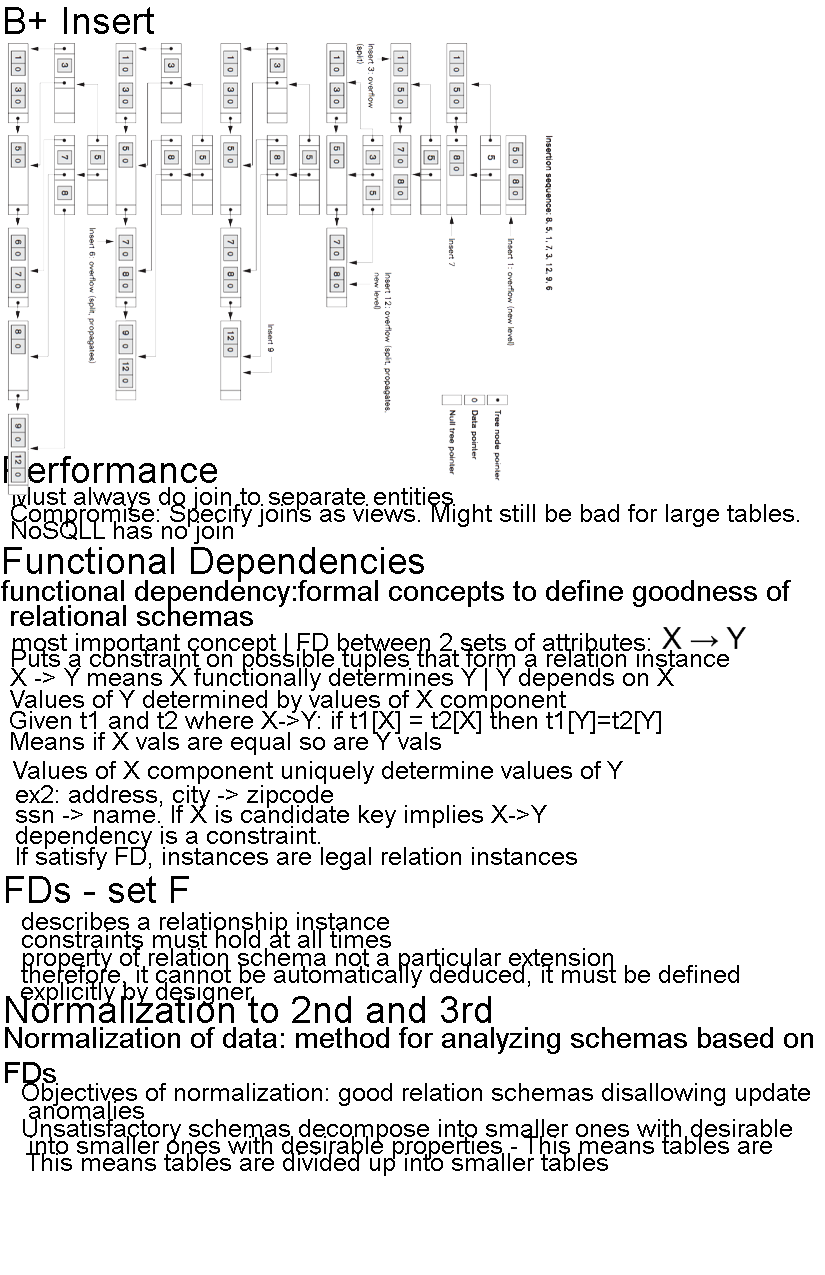
<style>
.page{position:relative;width:825px;height:1275px;background:#ffffff}
.page>*{position:absolute;margin:0}
.t1{font:37.5px "ArialMT";color:#000000}
.t2{font:25px "ArialMT";color:#000000}
.t3{font:29.2px/25px "ArialMT";color:#000000}
.t4{font:25px/20.9px "ArialMT";color:#000000}
.t5{font:29.2px "ArialMT";color:#000000}
</style>
<div class="page">
<p class="t1" style="left:5px;top:7px;width:149px;height:27px">B+ Insert</p>
<p class="t1" style="left:4px;top:456px;width:213px;height:27px">Performance</p>
<p class="t2" style="left:13px;top:487px;width:440px;height:23px">Must always do join to separate entities</p>
<p class="t2" style="left:11px;top:504px;width:788px;height:23px">Compromise: Specify joins as views. Might still be bad for large tables.</p>
<p class="t2" style="left:12px;top:521px;width:221px;height:23px">NoSQLL has no join</p>
<p class="t1" style="left:4px;top:547px;width:420px;height:35px">Functional Dependencies</p>
<p class="t3" style="left:1px;top:580px;width:790px;height:46px">functional dependency:formal concepts to define goodness of<br> relational schemas</p>
<p class="t2" style="left:13px;top:633px;width:637px;height:23px">most important concept | FD between 2 sets of attributes:</p>
<p class="t2" style="left:12px;top:649px;width:717px;height:23px">Puts a constraint on possible tuples that form a relation instance</p>
<p class="t2" style="left:10px;top:668px;width:664px;height:23px">X -&gt; Y means X functionally determines Y | Y depends on X</p>
<p class="t2" style="left:10px;top:690px;width:556px;height:23px">Values of Y determined by values of X component</p>
<p class="t4" style="left:10px;top:711px;width:651px;height:44px">Given t1 and t2 where X-&gt;Y: if t1[X] = t2[X] then t1[Y]=t2[Y]<br>Means if X vals are equal so are Y vals</p>
<p class="t2" style="left:13px;top:761px;width:610px;height:23px">Values of X component uniquely determine values of Y</p>
<p class="t4" style="left:16px;top:785px;width:561px;height:85px">ex2: address, city -&gt; zipcode<br>ssn -&gt; name. If X is candidate key implies X-&gt;Y<br>dependency is a constraint.<br>If satisfy FD, instances are legal relation instances</p>
<p class="t1" style="left:6px;top:876px;width:183px;height:27px">FDs - set F</p>
<p class="t2" style="left:22px;top:912px;width:367px;height:23px">describes a relationship instance</p>
<p class="t2" style="left:22px;top:930px;width:369px;height:18px">constraints must hold at all times</p>
<p class="t2" style="left:23px;top:948px;width:590px;height:23px">property of relation schema not a particular extension</p>
<p class="t2" style="left:21px;top:965px;width:718px;height:23px">therefore, it cannot be automatically deduced, it must be defined</p>
<p class="t2" style="left:21px;top:982px;width:231px;height:23px">explicitly by designer</p>
<p class="t1" style="left:6px;top:996px;width:485px;height:27px">Normalization to 2nd and 3rd</p>
<p class="t5" style="left:5px;top:1027px;width:808px;height:56px">Normalization of data: method for analyzing schemas based on<br>FDs</p>
<p class="t2" style="left:22px;top:1083px;width:788px;height:23px">Objectives of normalization: good relation schemas disallowing update</p>
<p class="t2" style="left:29px;top:1101px;width:115px;height:18px">anomalies</p>
<p class="t2" style="left:23px;top:1119px;width:769px;height:23px">Unsatisfactory schemas decompose into smaller ones with desirable</p>
<p class="t2" style="left:30px;top:1136px;width:742px;height:23px">into smaller ones with desirable properties - This means tables are</p>
<p class="t2" style="left:26px;top:1153px;width:582px;height:23px">This means tables are divided up into smaller tables</p>
</div>
